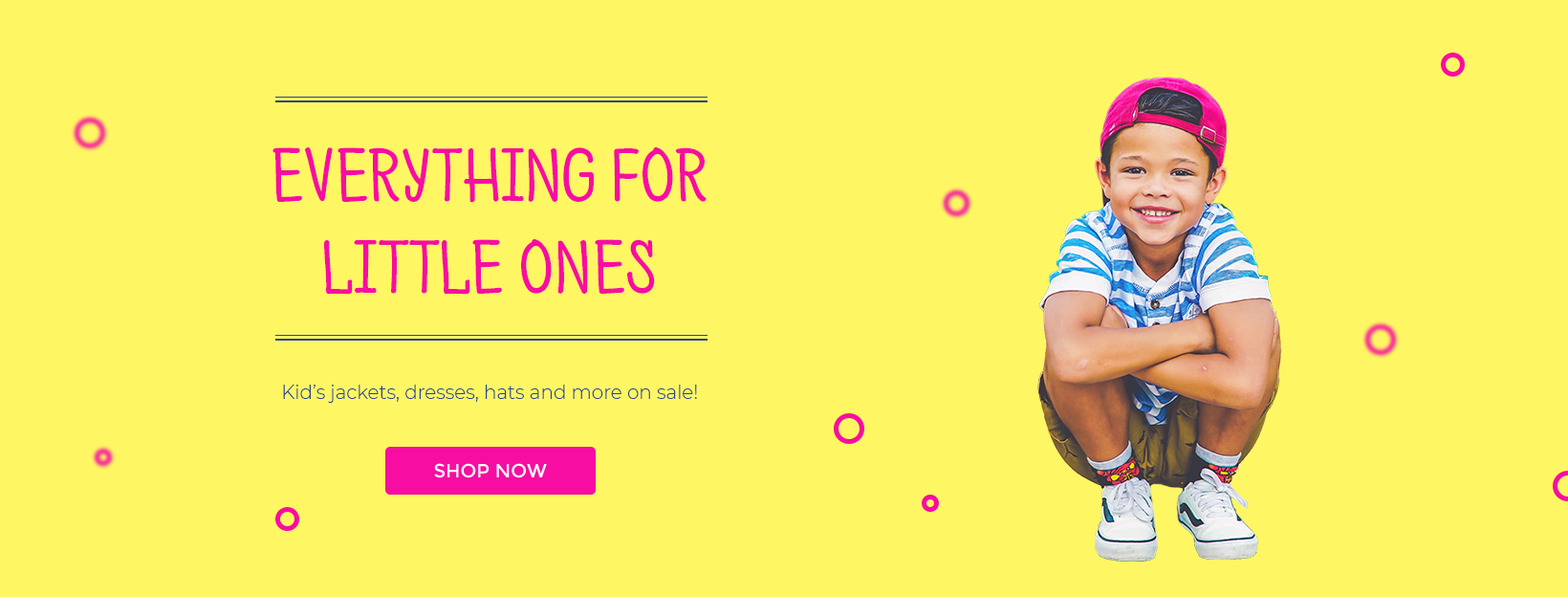
<style>
.page{position:relative;width:1568px;height:597px;background:#fef763}
.page>*{position:absolute;margin:0}
.t1{font:76.5px "PH-600RegularCaps";color:#f70da1}
.t2{font:19.1px "Montserrat-Light";color:#274396}
.t3{font:19.1px "Montserrat-Regular";color:#ffffff}
</style>
<div class="page">
<p class="t1" style="left:272px;top:147px;width:435px;height:147px;text-align:center">EVERYTHING FOR<br>LITTLE ONES</p>
<p class="t2" style="left:283px;top:384px;width:414px;height:19px">Kid’s jackets, dresses, hats and more on sale!</p>
<p class="t3" style="left:434px;top:463px;width:113px;height:15px">SHOP NOW</p>
</div>
